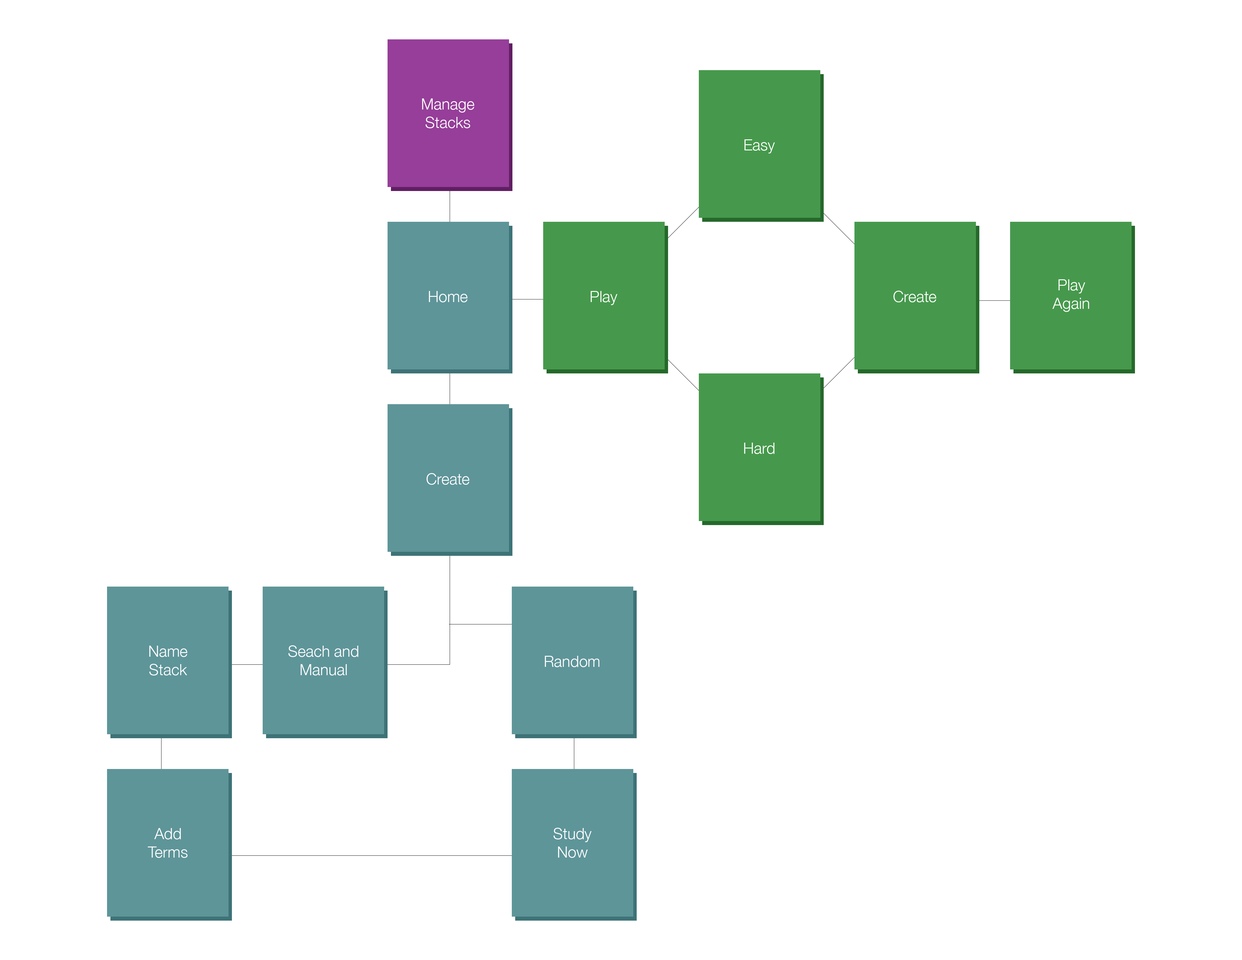
<style>
.page{position:relative;width:1242px;height:960px;background:#ffffff}
.page>*{position:absolute;margin:0}
.t1{font:15.4px "HelveticaNeue-Light";color:#ffffff}
</style>
<div class="page">
<p class="t1" style="left:422px;top:98px;width:52px;height:30px;text-align:center">Manage<br>Stacks</p>
<p class="t1" style="left:744px;top:139px;width:31px;height:14px">Easy</p>
<p class="t1" style="left:1052px;top:279px;width:37px;height:33px;text-align:center">Play<br>Again</p>
<p class="t1" style="left:429px;top:291px;width:39px;height:11px">Home</p>
<p class="t1" style="left:591px;top:291px;width:26px;height:14px">Play</p>
<p class="t1" style="left:893px;top:291px;width:43px;height:11px">Create</p>
<p class="t1" style="left:744px;top:443px;width:31px;height:11px">Hard</p>
<p class="t1" style="left:426px;top:473px;width:43px;height:12px">Create</p>
<p class="t1" style="left:149px;top:646px;width:38px;height:29px;text-align:center">Name<br>Stack</p>
<p class="t1" style="left:288px;top:645px;width:70px;height:30px;text-align:center">Seach and<br>Manual</p>
<p class="t1" style="left:545px;top:656px;width:55px;height:11px">Random</p>
<p class="t1" style="left:148px;top:828px;width:40px;height:30px;text-align:center">Add<br>Terms</p>
<p class="t1" style="left:553px;top:828px;width:39px;height:30px;text-align:center">Study<br>Now</p>
</div>
